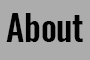
<style>
.page{position:relative;width:90px;height:60px;background:#acacac}
.page>*{position:absolute;margin:0}
.t1{font:34.6px "Oswald-Medium";color:#000000}
</style>
<div class="page">
<p class="t1" style="left:6px;top:13px;width:77px;height:29px">About</p>
</div>
